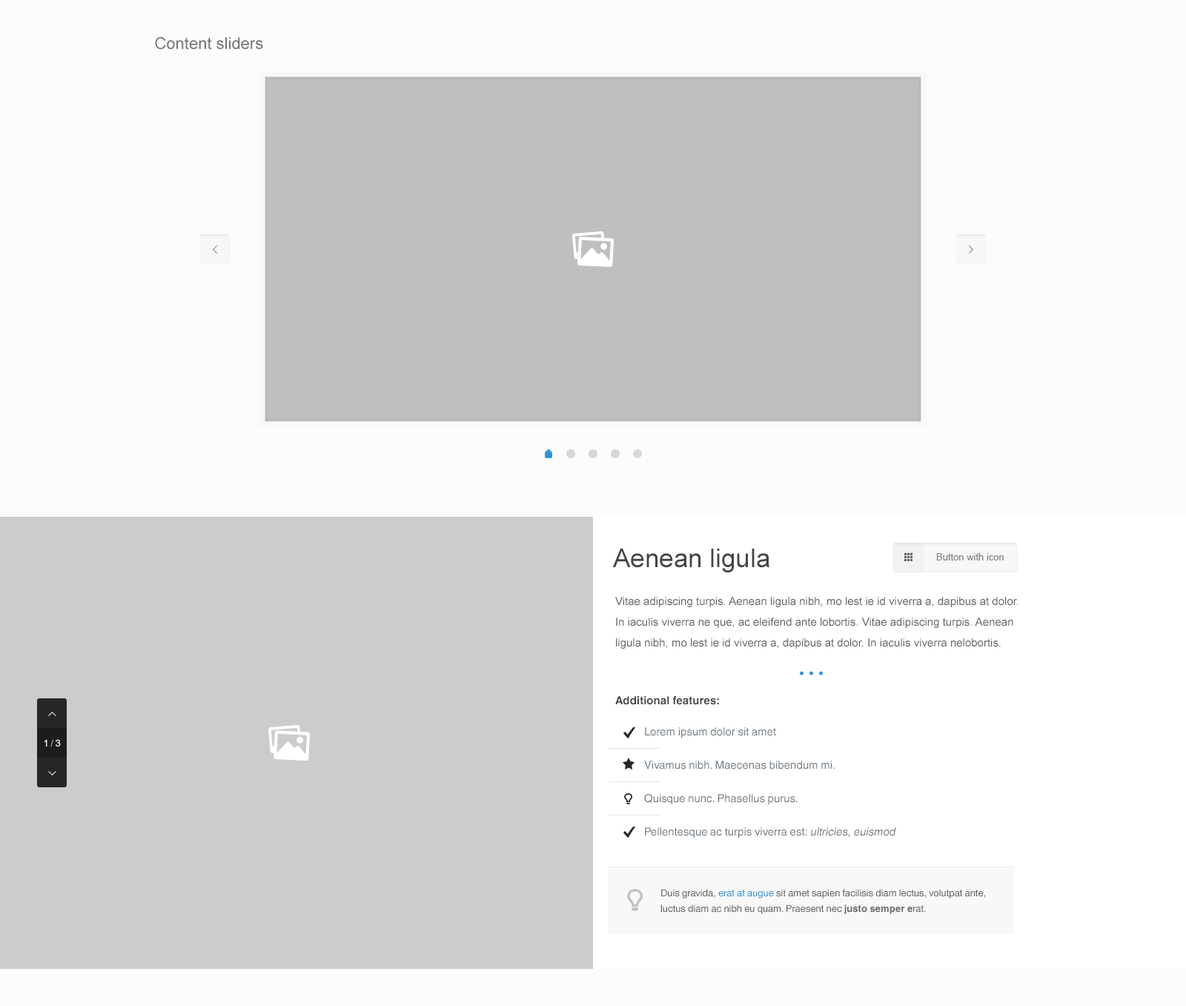
<style>
.page{position:relative;width:1186px;height:1006px;background:#fcfcfc}
.page>*{position:absolute;margin:0}
.t1{font:16.3px "ArialMT";color:#737373}
.t2{font:25.9px "ArialMT";color:#444444}
.t3{font:9.6px "ArialMT";color:#747474}
.t4{font:11.1px/20.8px "ArialMT";color:#626262}
.t5{font:11.1px "HelveticaWorld-Bold";color:#444444}
.t6{font:11.1px/33.3px "HelveticaWorld-Regular";color:#737e86}
.t7{font:11.1px/33.3px "HelveticaWorld-Regular";color:#737e86;font-style:italic}
.t8{font:9.6px "ArialMT";letter-spacing:-0.04em;color:#ffffff}
.t9{font:9.6px "ArialMT";letter-spacing:-0.04em;color:#adadad}
.t10{font:9.6px/15.6px "HelveticaWorld-Regular";color:#626262}
.t11{font:9.6px/15.6px "HelveticaWorld-Regular";color:#2e96db}
.t12{font:9.6px/15.6px "HelveticaWorld-Bold";color:#626262}
</style>
<div class="page">
<p class="t1" style="left:155px;top:37px;width:108px;height:13px">Content sliders</p>
<p class="t2" style="left:612px;top:548px;width:157px;height:25px">Aenean ligula</p>
<p class="t3" style="left:936px;top:553px;width:67px;height:7px;opacity:0.9">Button with icon</p>
<p class="t4" style="left:615px;top:597px;width:403px;height:51px">Vitae adipiscing turpis. Aenean ligula nibh, mo lest ie id viverra a, dapibus at dolor. In iaculis viverra ne que, ac eleifend ante lobortis. Vitae adipiscing turpis. Aenean ligula nibh, mo lest ie id viverra a, dapibus at dolor. In iaculis viverra nelobortis.</p>
<p class="t5" style="left:615px;top:696px;width:104px;height:9px">Additional features:</p>
<p class="t6" style="left:644px;top:727px;width:252px;height:110px">Lorem ipsum dolor sit amet<br>Vivamus nibh. Maecenas bibendum mi.<br>Quisque nunc. Phasellus purus.<br>Pellentesque ac turpis viverra est: <span class="t7">ultricies</span>, <span class="t7">euismod</span></p>
<p class="t8" style="left:44px;top:739px;width:17px;height:7px">1 <span class="t9">/ </span>3</p>
<p class="t10" style="left:660px;top:889px;width:325px;height:25px">Duis gravida, <span class="t11">erat at augue</span> sit amet sapien facilisis diam lectus, volutpat ante, luctus diam ac nibh eu quam. Praesent nec <span class="t12">justo semper e</span>rat.</p>
</div>
